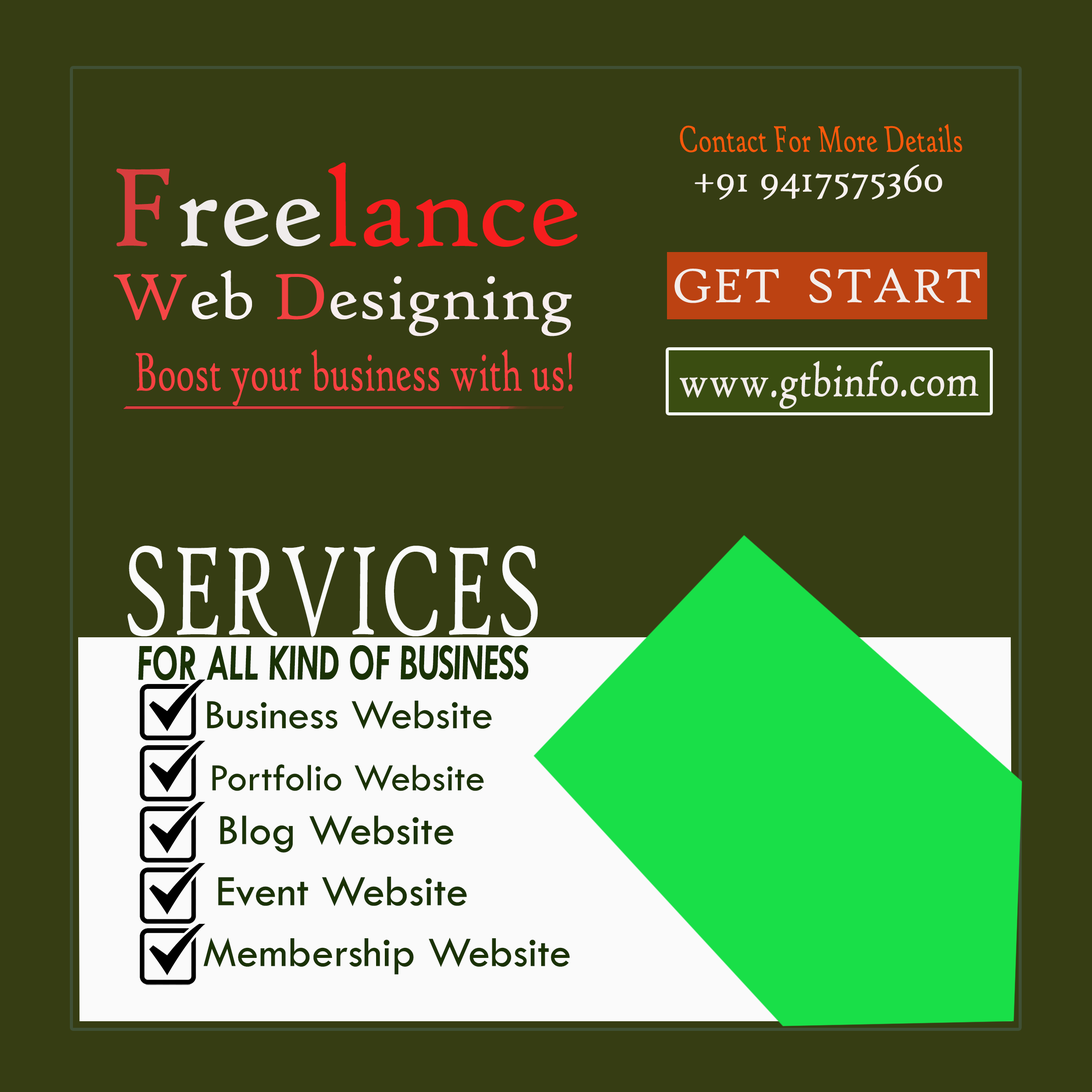
<style>
.page{position:relative;width:1092px;height:1092px;background:#363d13}
.page>*{position:absolute;margin:0}
.t1{font:39.7px "HighTowerText-Reg";color:#f9590b;scale:0.66 1}
.t2{font:119.4px "HighTowerText-Reg";color:#f71e1e}
.t3{font:119.4px "HighTowerText-Reg";color:#d83e3e}
.t4{font:119.4px "HighTowerText-Reg";color:#f0ecec}
.t5{font:43.1px "HighTowerText-Reg";color:#f8f1ee}
.t6{font:69.8px "HighTowerText-Reg";color:#f7eeee}
.t7{font:69.8px "HighTowerText-Reg";color:#f54646}
.t8{font:69.8px "HighTowerText-Reg";color:#faf4f4}
.t9{font:69.8px "HighTowerText-Reg";color:#f24141}
.t10{font:51px "HighTowerText-Reg";color:#f3edea}
.t11{font:58.6px "HighTowerText-Reg";color:#f84141;scale:0.63 1}
.t12{font:50.5px "HighTowerText-Reg";color:#f3edea;scale:0.79 1}
.t13{font:135px "HighTowerText-Reg";color:#fafafa;scale:0.63 1}
.t14{font:52.8px "TwCenMT-BoldItalic";color:#1a3205;scale:0.67 1}
.t15{font:43.6px "TwCenMT-Regular";color:#1a3205}
.t16{font:40.2px "TwCenMT-Regular";color:#1a3205}
.t17{font:44.8px "TwCenMT-Regular";color:#1a3205}
.t18{font:45px "TwCenMT-Regular";color:#1a3205}
.t19{font:43.8px "TwCenMT-Regular";color:#1a3205}
</style>
<div class="page">
<p class="t1" style="left:680px;top:124px;width:282px;height:28px">Contact For More Details</p>
<p class="t2" style="left:116px;top:162px;width:461px;height:85px"><span class="t3">F</span><span class="t4">ree</span>lance</p>
<p class="t5" style="left:695px;top:164px;width:247px;height:36px">+91 9417575360</p>
<p class="t6" style="left:114px;top:270px;width:458px;height:66px"><span class="t7">W</span><span class="t8">eb </span><span class="t9">D</span>esigning</p>
<p class="t10" style="left:674px;top:268px;width:306px;height:35px">GET  START</p>
<p class="t11" style="left:135px;top:349px;width:438px;height:57px">Boost your business with us!</p>
<p class="t12" style="left:680px;top:361px;width:298px;height:48px">www.gtbinfo.com</p>
<p class="t13" style="left:128px;top:546px;width:410px;height:91px">SERVICES</p>
<p class="t14" style="left:138px;top:645px;width:391px;height:36px">FOR ALL KIND OF BUSINESS</p>
<p class="t15" style="left:207px;top:700px;width:285px;height:29px">Business Website</p>
<p class="t16" style="left:212px;top:764px;width:272px;height:27px">Portfolio Website</p>
<p class="t17" style="left:220px;top:815px;width:233px;height:38px">Blog Website</p>
<p class="t18" style="left:218px;top:876px;width:249px;height:30px">Event Website</p>
<p class="t19" style="left:204px;top:937px;width:366px;height:37px">Membership Website</p>
</div>
